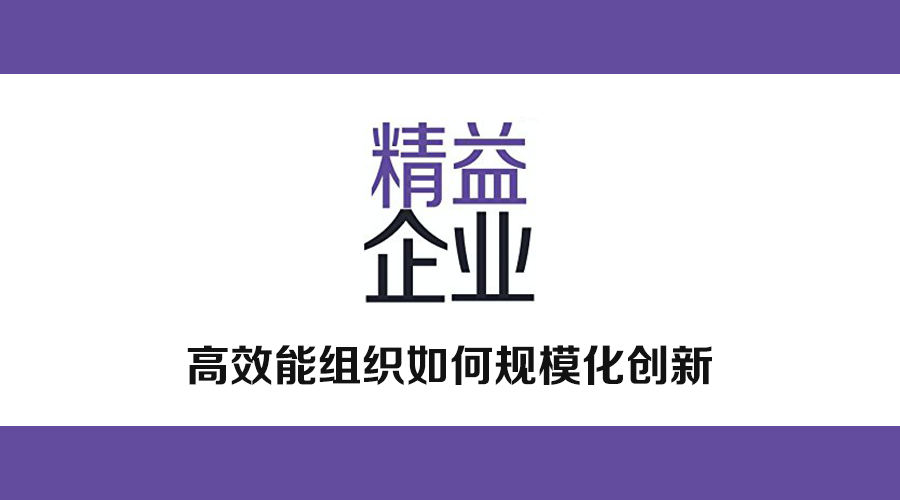
<style>
.page{position:relative;width:900px;height:500px;background:#ffffff}
.page>*{position:absolute;margin:0}
.t1{font:44px "FZZCHJW--GB1-0";color:#121212}
</style>
<div class="page">
<p class="t1" style="left:187px;top:345px;width:525px;height:41px">高效能组织如何规模化创新</p>
</div>
